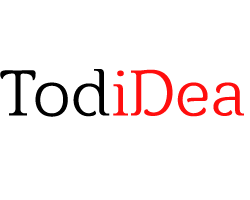
<style>
.page{position:relative;width:250px;height:200px;background:#ffffff}
.page>*{position:absolute;margin:0}
.t1{font:66px "Barkentina";color:#ff0e0e}
.t2{font:66px "Barkentina";color:#000000}
</style>
<div class="page">
<p class="t1" style="left:0px;top:69px;width:244px;height:48px"><span class="t2">Tod</span>iDea</p>
</div>
